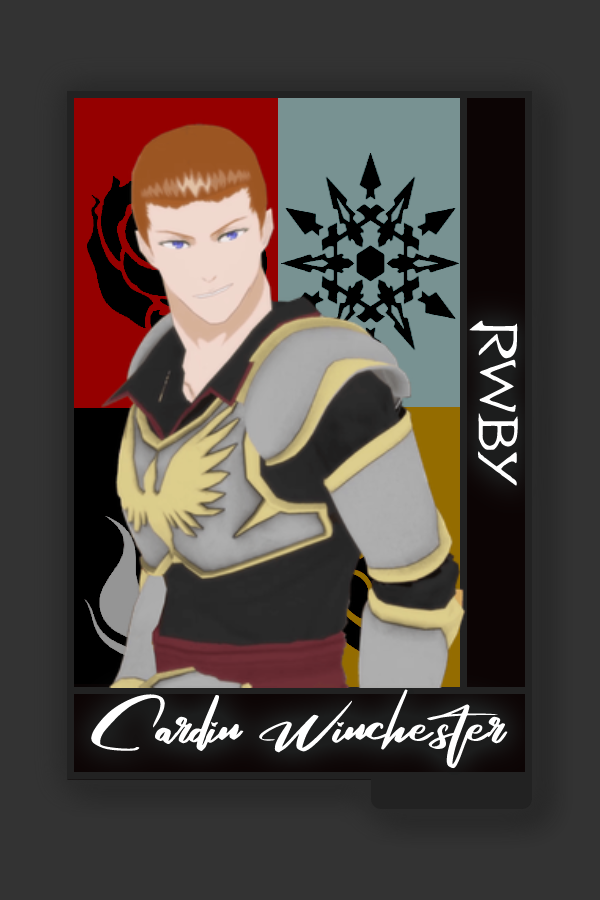
<style>
.page{position:relative;width:600px;height:900px;background:#333333}
.page>*{position:absolute;margin:0}
.t1{font:61.3px "RWBY_Style";color:#ffffff;scale:1.25 1}
.t2{font:75px "RosegaFREE";color:#ffffff}
</style>
<div class="page">
<p class="t1" style="left:469px;top:320px;width:49px;height:166px;rotate:90deg">RWBY</p>
<p class="t2" style="left:90px;top:689px;width:418px;height:80px">Cardin Winchester</p>
</div>
